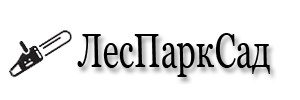
<style>
.page{position:relative;width:300px;height:100px;background:#ffffff}
.page>*{position:absolute;margin:0}
.t1{font:48px "Georgia";color:#000000;scale:0.69 1}
</style>
<div class="page">
<p class="t1" style="left:77px;top:33px;width:193px;height:44px">ЛесПаркСад</p>
</div>
